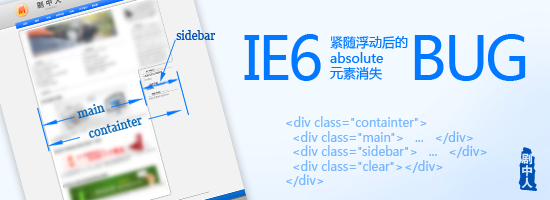
<style>
.page{position:relative;width:550px;height:200px;background:#f2f9ff}
.page>*{position:absolute;margin:0}
.t1{font:12px "Georgia";color:#0050b4}
.t2{font:60px "MicrosoftYaHei";letter-spacing:-0.05em;color:#0078ff}
.t3{font:13px "MicrosoftYaHei";color:#0078ff}
.t4{font:12px "MicrosoftYaHei";color:#77b7ff}
</style>
<div class="page">
<p class="t1" style="left:176px;top:30px;width:40px;height:10px">sidebar</p>
<p class="t2" style="left:244px;top:34px;width:77px;height:47px">IE6</p>
<p class="t3" style="left:330px;top:36px;width:78px;height:44px">紧随浮动后的<br>absolute<br>元素消失</p>
<p class="t2" style="left:414px;top:34px;width:112px;height:47px">BUG</p>
<p class="t4" style="left:286px;top:116px;width:201px;height:71px">&lt;div class="containter"&gt;<br>  &lt;div class="main"&gt;   ...   &lt;/div&gt;<br>  &lt;div class="sidebar"&gt;   ...   &lt;/div&gt;<br>  &lt;div class="clear"&gt;&lt;/div&gt;<br>&lt;/div&gt;</p>
</div>
